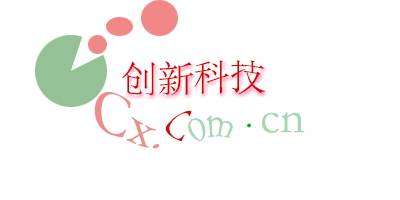
<style>
.page{position:relative;width:400px;height:200px;background:#ffffff}
.page>*{position:absolute;margin:0}
.t1{font:36px "STSong";color:#e10000}
.t2{font:60px "STSong";color:#ed8d8d}
.t3{font:48px "STSong";color:#a3d9b1}
.t4{font:36px "STSong";color:#a3d9b1}
.t5{font:36px "STSong";color:#00af43}
</style>
<div class="page">
<p class="t1" style="left:122px;top:60px;width:143px;height:36px">创新科技</p>
<p class="t2" style="left:94px;top:92px;width:66px;height:57px;rotate:15deg">Cx.</p>
<p class="t1" style="left:165px;top:110px;width:27px;height:32px">C</p>
<p class="t3" style="left:262px;top:112px;width:43px;height:21px">cn</p>
<p class="t4" style="left:188px;top:115px;width:45px;height:26px">om</p>
<p class="t5" style="left:247px;top:123px;width:4px;height:5px">.</p>
</div>
